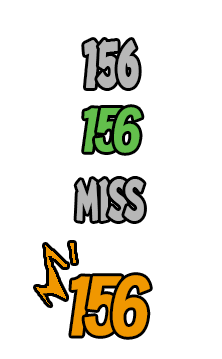
<style>
.page{position:relative;width:222px;height:359px;background:#ffffff}
.page>*{position:absolute;margin:0}
.t1{font:56.6px "NIS-EDO-RKSJ-H";letter-spacing:-0.06em;color:#b7b7b7}
.t2{font:56.6px "zihunbiantaoti";letter-spacing:-0.06em;color:#63bf4c}
.t3{font:49.1px "NIS-EDO-RKSJ-H";letter-spacing:-0.06em;color:#b7b7b7}
.t4{font:76.8px "zihunbiantaoti";letter-spacing:-0.06em;color:#f09700}
</style>
<div class="page">
<p class="t1" style="left:84px;top:40px;width:15px;height:48px">1</p>
<p class="t1" style="left:97px;top:40px;width:22px;height:48px">5</p>
<p class="t1" style="left:117px;top:40px;width:22px;height:48px">6</p>
<p class="t2" style="left:84px;top:108px;width:14px;height:44px">1</p>
<p class="t2" style="left:95px;top:108px;width:27px;height:44px">5</p>
<p class="t2" style="left:114px;top:107px;width:28px;height:46px">6</p>
<p class="t3" style="left:76px;top:179px;width:23px;height:42px">M</p>
<p class="t3" style="left:99px;top:179px;width:9px;height:42px">I</p>
<p class="t3" style="left:108px;top:179px;width:20px;height:42px">S</p>
<p class="t3" style="left:124px;top:179px;width:20px;height:42px">S</p>
<p class="t4" style="left:71px;top:276px;width:20px;height:60px">1</p>
<p class="t4" style="left:84px;top:276px;width:38px;height:60px">5</p>
<p class="t4" style="left:112px;top:275px;width:38px;height:62px">6</p>
</div>
